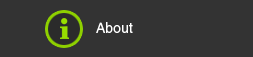
<style>
.page{position:relative;width:253px;height:57px;background:#333333}
.page>*{position:absolute;margin:0}
.t1{font:14px "Helvetica";color:#ffffff}
</style>
<div class="page">
<p class="t1" style="left:96px;top:22px;width:37px;height:11px">About</p>
</div>
